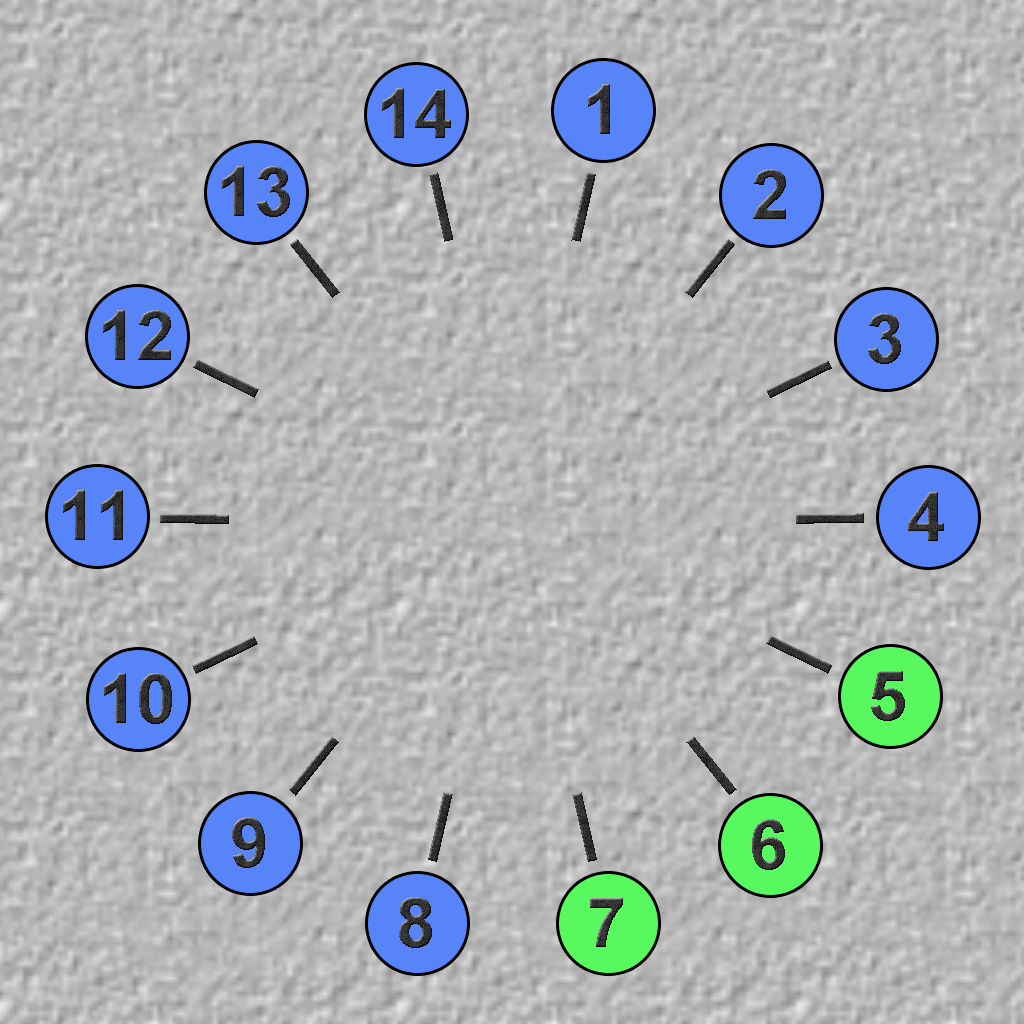
<style>
.page{position:relative;width:1024px;height:1024px}
.page>*{position:absolute;margin:0}
.t1{font:70px "Arial-BoldMT"}
.t2{font:73.4px/35.8px "ArialMT";letter-spacing:1.41em;scale:1.67 1}
</style>
<div class="page">
<p class="t1" style="left:382px;top:88px;width:69px;height:50px">14</p>
<p class="t1" style="left:588px;top:84px;width:22px;height:50px">1</p>
<p class="t2" style="left:160px;top:172px;width:704px;height:690px;text-align:center">||||||||||||||</p>
<p class="t1" style="left:222px;top:166px;width:68px;height:51px">13</p>
<p class="t1" style="left:753px;top:169px;width:33px;height:50px">2</p>
<p class="t1" style="left:103px;top:310px;width:68px;height:50px">12</p>
<p class="t1" style="left:868px;top:313px;width:33px;height:51px">3</p>
<p class="t1" style="left:63px;top:490px;width:60px;height:50px">11</p>
<p class="t1" style="left:908px;top:492px;width:36px;height:49px">4</p>
<p class="t1" style="left:104px;top:673px;width:68px;height:51px">10</p>
<p class="t1" style="left:871px;top:671px;width:34px;height:50px">5</p>
<p class="t1" style="left:232px;top:817px;width:33px;height:51px">9</p>
<p class="t1" style="left:752px;top:819px;width:33px;height:51px">6</p>
<p class="t1" style="left:399px;top:897px;width:33px;height:51px">8</p>
<p class="t1" style="left:590px;top:898px;width:33px;height:49px">7</p>
</div>
